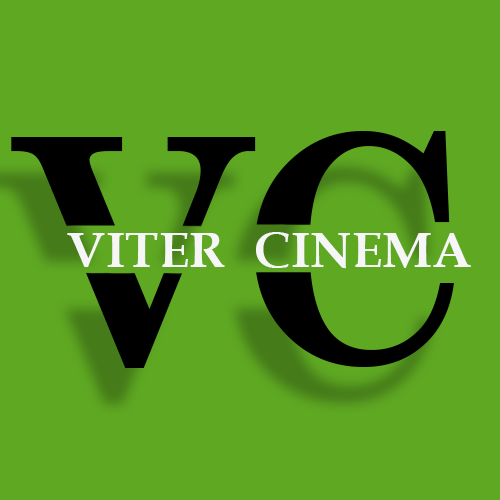
<style>
.page{position:relative;width:500px;height:500px;background:#5ea822}
.page>*{position:absolute;margin:0}
.t1{font:50px "BookAntiqua-Bold";color:#f6f6f6}
</style>
<div class="page">
<p class="t1" style="left:67px;top:233px;width:158px;height:34px">VITER</p>
<p class="t1" style="left:256px;top:232px;width:215px;height:37px">CINEMA</p>
</div>
